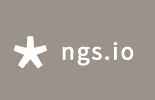
<style>
.page{position:relative;width:155px;height:100px;background:#9b9389}
.page>*{position:absolute;margin:0}
.t1{font:109.5px "SourceSansPro-Regular";letter-spacing:0.135em;color:#ffffff;font-weight:bold}
.t2{font:25px "SourceSansPro-Regular";letter-spacing:0.055em;color:#ffffff;font-weight:bold}
</style>
<div class="page">
<p class="t1" style="left:13px;top:36px;width:34px;height:33px">*</p>
<p class="t2" style="left:62px;top:42px;width:72px;height:24px">ngs.io</p>
</div>
